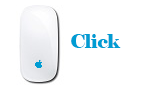
<style>
.page{position:relative;width:159px;height:85px;background:#ffffff}
.page>*{position:absolute;margin:0}
.t1{font:18.7px "Elephant-Regular";color:#009cd3}
</style>
<div class="page">
<p class="t1" style="left:71px;top:34px;width:50px;height:14px">Click</p>
</div>
